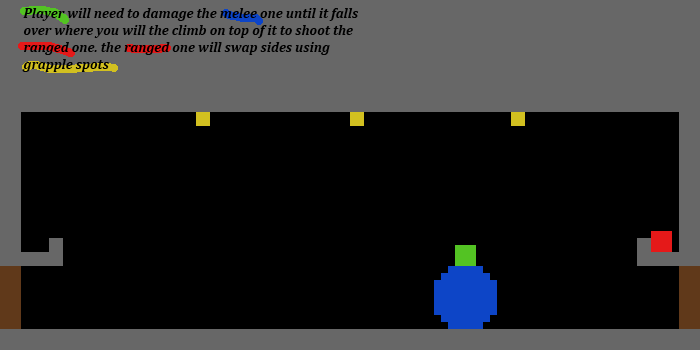
<style>
.page{position:relative;width:700px;height:350px;background:#000000}
.page>*{position:absolute;margin:0}
.t1{font:14px "Cambria-BoldItalic";color:#000000}
</style>
<div class="page">
<p class="t1" style="left:22px;top:8px;width:337px;height:64px">Player will need to damage the melee one until it falls over where you will the climb on top of it to shoot the ranged one. the ranged one will swap sides using <br>grapple spots</p>
</div>
